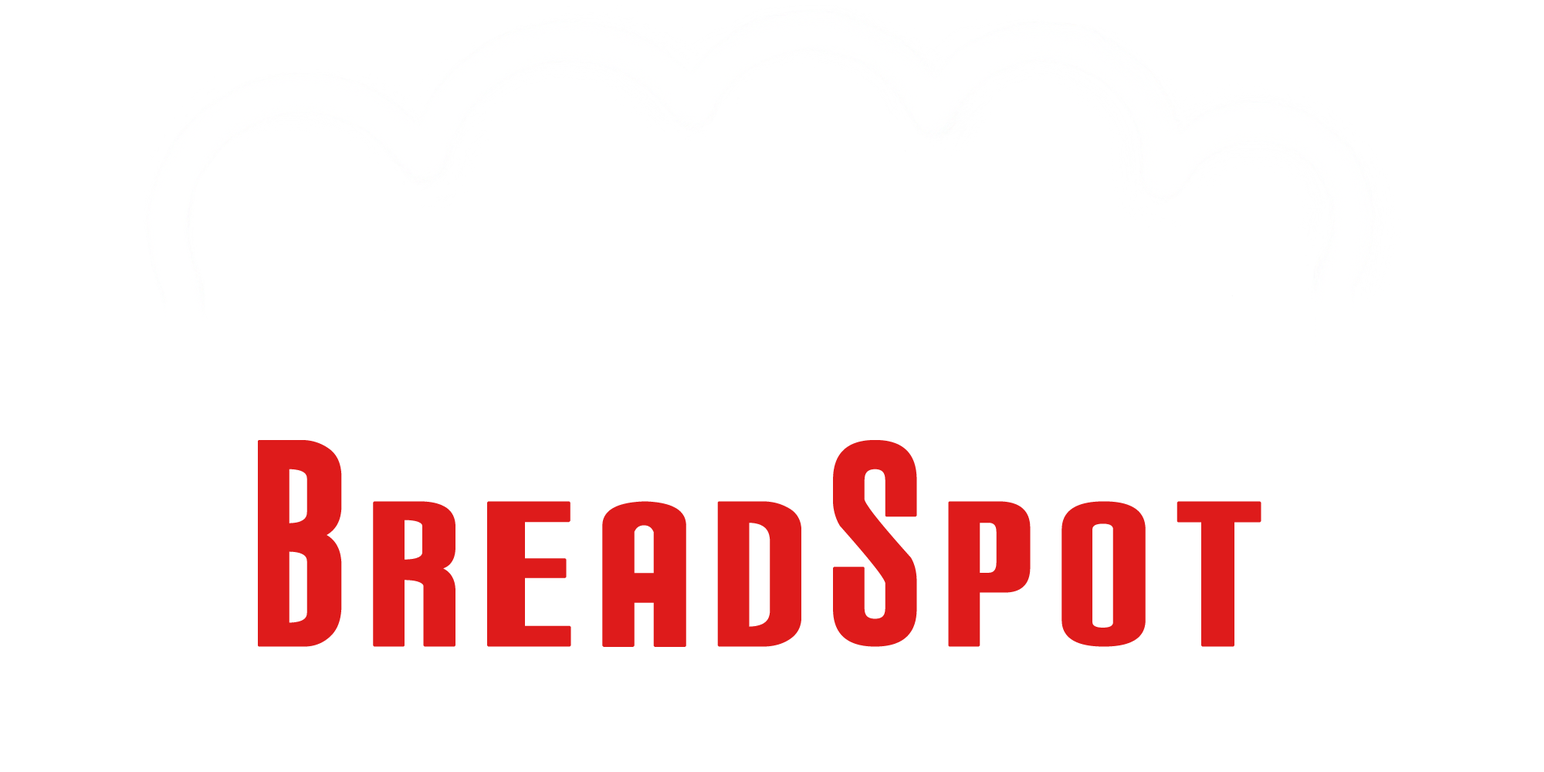
<style>
.page{position:relative;width:1544px;height:772px;background:#ffffff}
.page>*{position:absolute;margin:0}
.t1{font:291.9px "AndersonSupercar";letter-spacing:0.05em;color:#de1b1b;font-weight:bold}
</style>
<div class="page">
<p class="t1" style="left:258px;top:440px;width:1004px;height:207px">BreadSpot</p>
</div>
